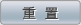
<style>
.page{position:relative;width:81px;height:25px}
.page>*{position:absolute;margin:0}
.t1{font:14px "STXihei";color:#414141;font-weight:bold}
</style>
<div class="page">
<p class="t1" style="left:22px;top:6px;width:36px;height:14px">重  置</p>
</div>
